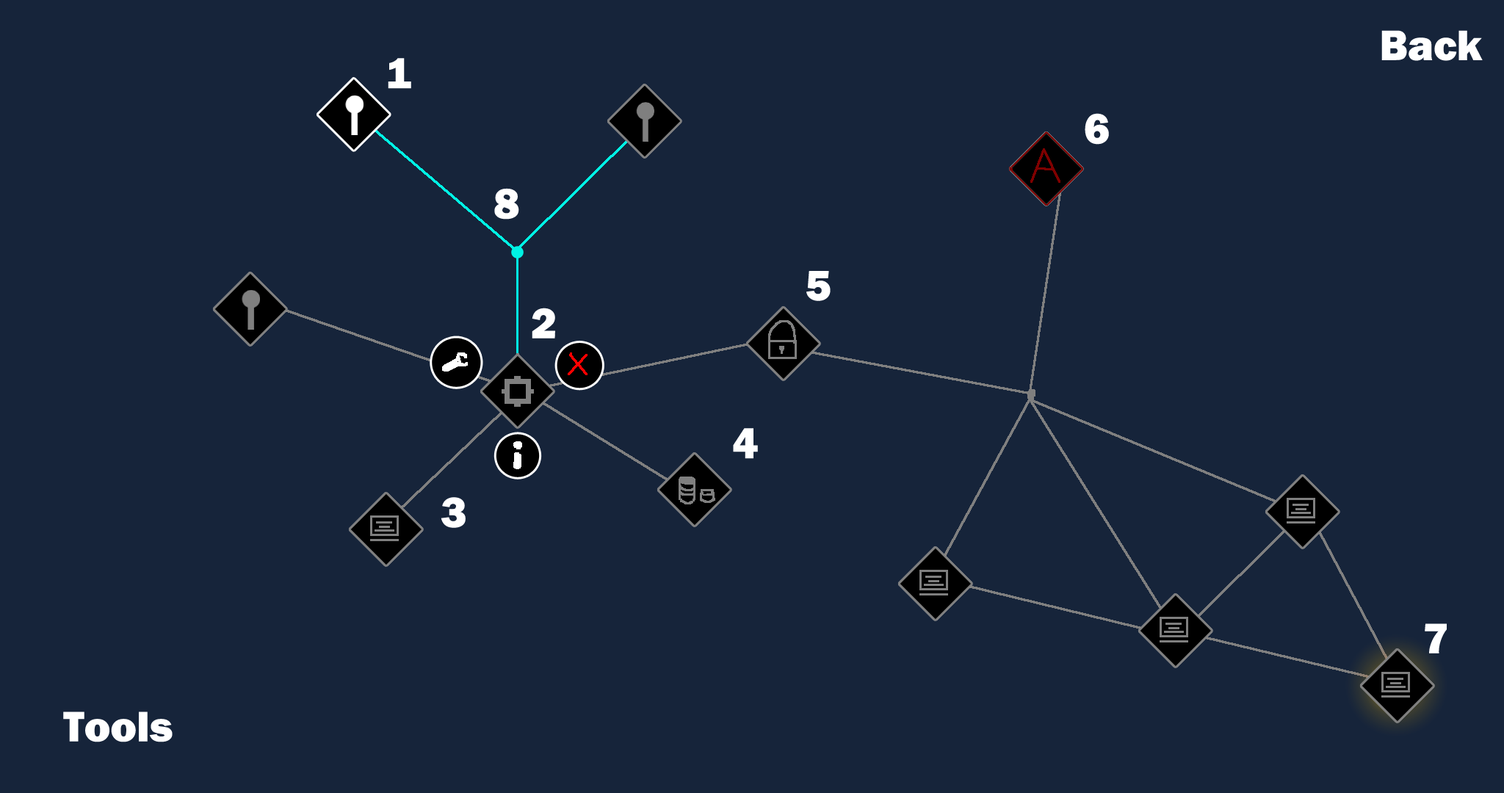
<style>
.page{position:relative;width:1504px;height:793px;background:#16243a}
.page>*{position:absolute;margin:0}
.t1{font:44.1px "FranklinGothic-Heavy";color:#ffffff}
</style>
<div class="page">
<p class="t1" style="left:1381px;top:30px;width:101px;height:31px">Back</p>
<p class="t1" style="left:388px;top:58px;width:23px;height:31px">1</p>
<p class="t1" style="left:1084px;top:113px;width:25px;height:32px">6</p>
<p class="t1" style="left:494px;top:188px;width:25px;height:32px">8</p>
<p class="t1" style="left:806px;top:271px;width:24px;height:30px">5</p>
<p class="t1" style="left:532px;top:308px;width:23px;height:30px">2</p>
<p class="t1" style="left:733px;top:428px;width:25px;height:31px">4</p>
<p class="t1" style="left:441px;top:497px;width:25px;height:31px">3</p>
<p class="t1" style="left:1424px;top:623px;width:22px;height:30px">7</p>
<p class="t1" style="left:63px;top:711px;width:110px;height:31px">Tools</p>
</div>
